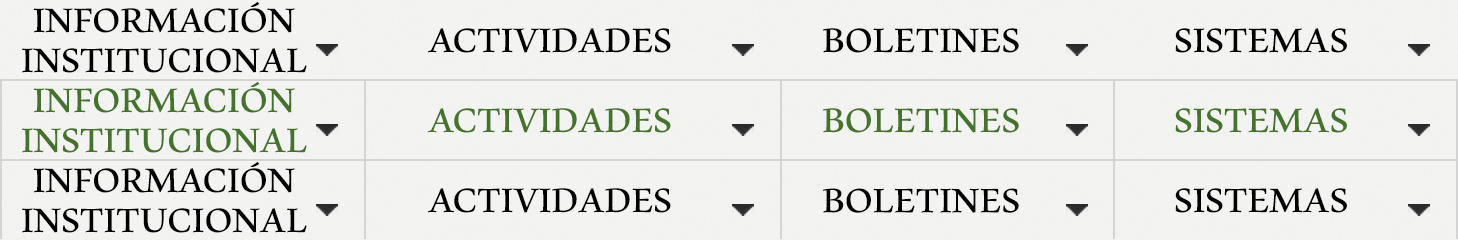
<style>
.page{position:relative;width:1458px;height:240px;background:#f3f3f1}
.page>*{position:absolute;margin:0}
.t1{font:60px/40px "Aldhabi";color:#000000}
.t2{font:60px "Aldhabi";color:#000000}
.t3{font:59.9px "Aldhabi";color:#000000}
.t4{font:60px/40px "Aldhabi";color:#45732d}
.t5{font:60px "Aldhabi";color:#45732d}
.t6{font:59.9px "Aldhabi";color:#45732d}
</style>
<div class="page">
<p class="t1" style="left:22px;top:1px;width:285px;height:72px;text-align:center">INFORMACIÓN<br>INSTITUCIONAL</p>
<p class="t2" style="left:427px;top:28px;width:244px;height:25px">ACTIVIDADES</p>
<p class="t2" style="left:822px;top:28px;width:197px;height:25px">BOLETINES</p>
<p class="t3" style="left:1175px;top:28px;width:172px;height:25px">SISTEMAS</p>
<p class="t4" style="left:22px;top:81px;width:285px;height:72px;text-align:center">INFORMACIÓN<br>INSTITUCIONAL</p>
<p class="t5" style="left:427px;top:108px;width:244px;height:25px">ACTIVIDADES</p>
<p class="t5" style="left:822px;top:108px;width:197px;height:25px">BOLETINES</p>
<p class="t6" style="left:1175px;top:108px;width:172px;height:25px">SISTEMAS</p>
<p class="t1" style="left:22px;top:161px;width:285px;height:72px;text-align:center">INFORMACIÓN<br>INSTITUCIONAL</p>
<p class="t2" style="left:427px;top:188px;width:244px;height:25px">ACTIVIDADES</p>
<p class="t2" style="left:822px;top:188px;width:197px;height:25px">BOLETINES</p>
<p class="t3" style="left:1175px;top:188px;width:172px;height:25px">SISTEMAS</p>
</div>
